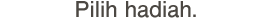
<style>
.page{position:relative;width:271px;height:21px;background:#ffffff}
.page>*{position:absolute;margin:0}
.t1{font:22px "FutoGoB101Pr5-Bold";color:#4c4843}
</style>
<div class="page">
<p class="t1" style="left:76px;top:1px;width:120px;height:17px">Pilih hadiah.</p>
</div>
